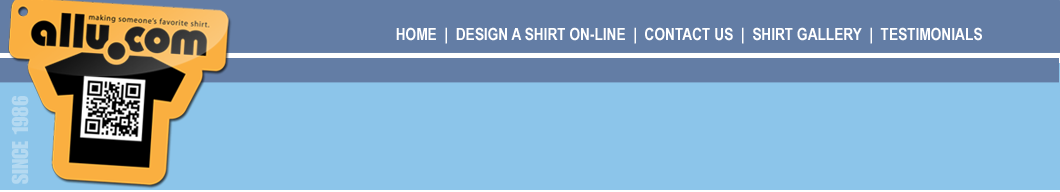
<style>
.page{position:relative;width:1060px;height:192px;background:#8cc5ea}
.page>*{position:absolute;margin:0}
.t1{font:16.7px "ArialNarrow-Bold";color:#ffffff}
.t2{font:22.4px "ImpactT";color:#b4d9f1}
</style>
<div class="page">
<p class="t1" style="left:396px;top:27px;width:586px;height:17px">HOME  |  DESIGN A SHIRT ON-LINE  |  CONTACT US  |  SHIRT GALLERY  |  TESTIMONIALS</p>
<p class="t2" style="left:11px;top:96px;width:18px;height:88px;rotate:-90deg">SINCE 1986</p>
</div>
